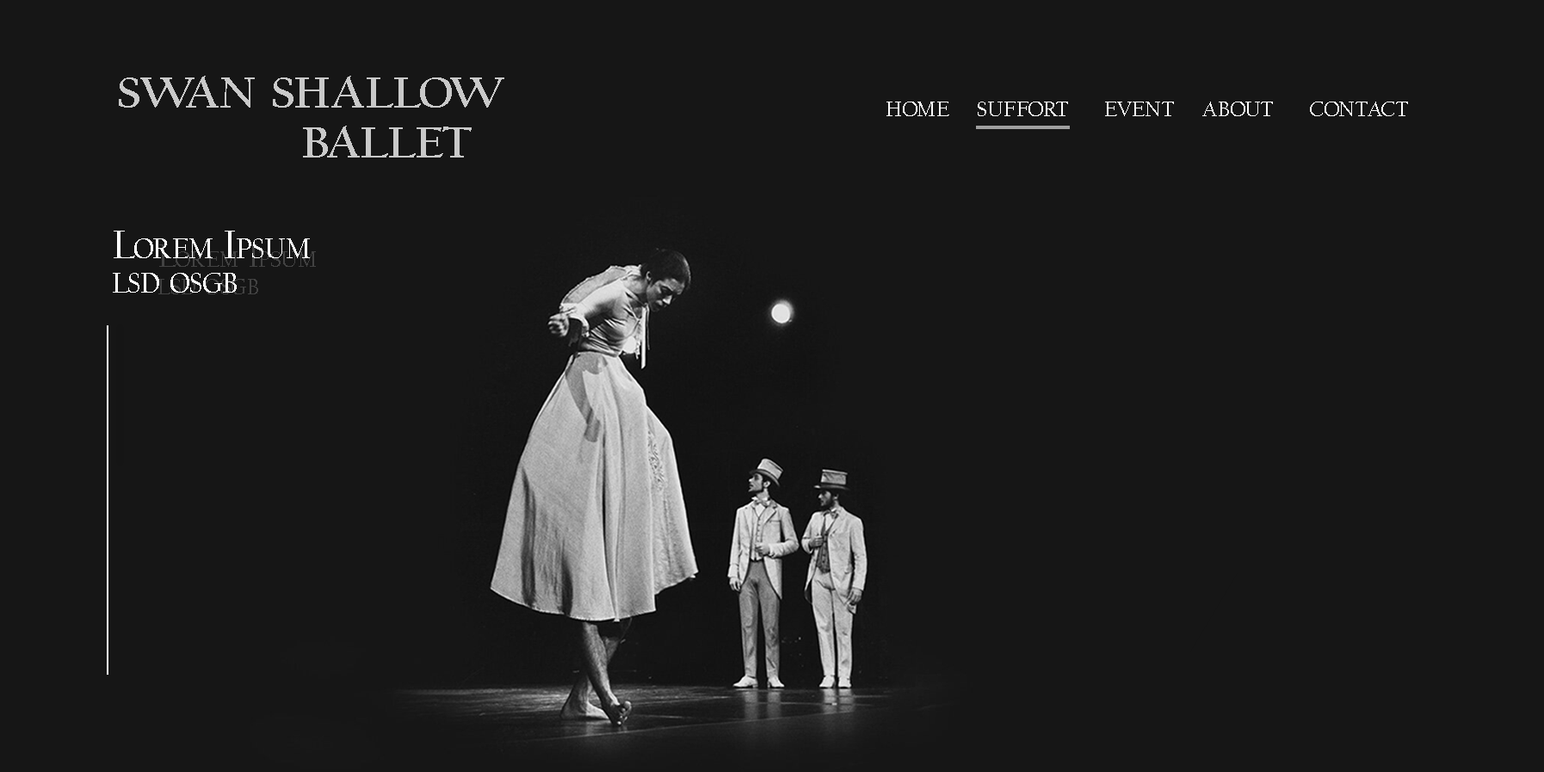
<style>
.page{position:relative;width:1544px;height:772px;background:#161616}
.page>*{position:absolute;margin:0}
.t1{font:65.5px/25px "CalifornianFB-Bold";color:#c9c9c9;font-variant:small-caps;scale:1.04 1}
.t2{font:32.2px "CalifornianFB-Reg";color:#ffffff;font-variant:small-caps}
.t3{font:41.3px/34.4px "CalifornianFB-Reg";color:#ffffff;font-variant:small-caps}
</style>
<div class="page">
<p class="t1" style="left:119px;top:76px;width:385px;height:82px">swan shallow <br>            <br>            ballet</p>
<p class="t2" style="left:887px;top:102px;width:521px;height:14px">home    suffort     event    about     contact</p>
<p class="t3" style="left:113px;top:231px;width:197px;height:62px">Lorem Ipsum<br>lsd osgb</p>
</div>
